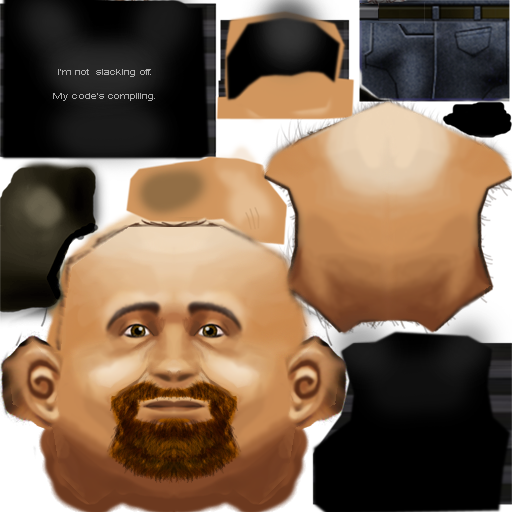
<style>
.page{position:relative;width:512px;height:512px}
.page>*{position:absolute;margin:0}
.t1{font:8px/24px "ArialMT";letter-spacing:-0.075em;color:#aeaeae;scale:1.6 1}
</style>
<div class="page">
<p class="t1" style="left:53px;top:69px;width:102px;height:32px;text-align:center">I’m not  slacking off.<br>My code’s compiling.</p>
</div>
